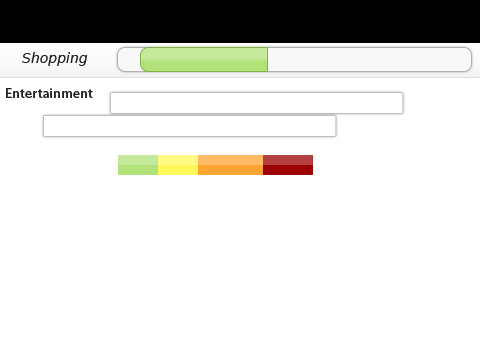
<style>
.page{position:relative;width:480px;height:360px;background:#ffffff}
.page>*{position:absolute;margin:0}
.t1{font:14px "DejaVuSans-Oblique";color:#222222}
.t2{font:14px "MyriadPro-Semibold";color:#222222}
</style>
<div class="page">
<p class="t1" style="left:22px;top:52px;width:66px;height:14px">Shopping</p>
<p class="t2" style="left:6px;top:88px;width:87px;height:10px">Entertainment</p>
</div>
